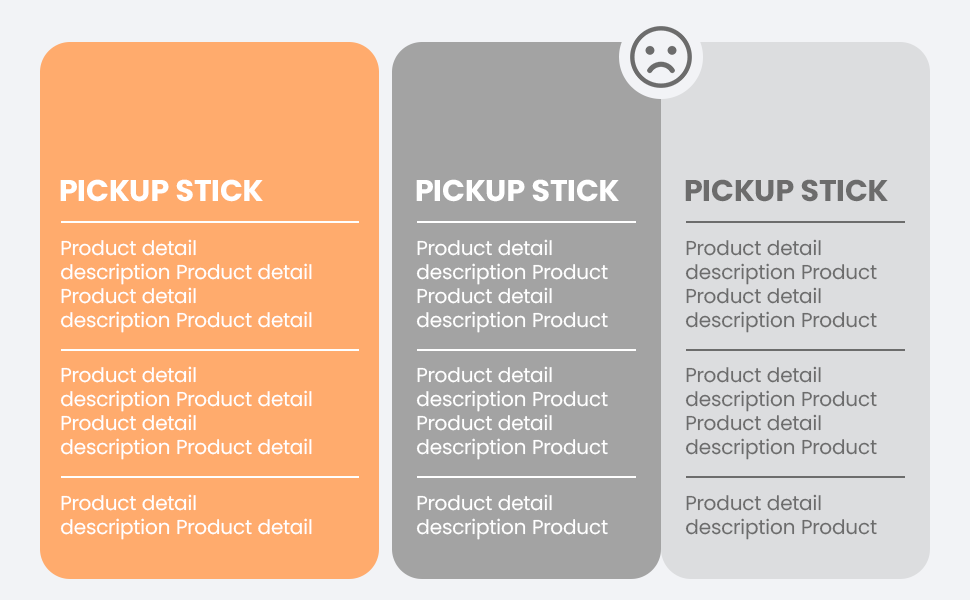
<style>
.page{position:relative;width:970px;height:600px;background:#ffab6d}
.page>*{position:absolute;margin:0}
.t1{font:30px "Poppins-Bold";color:#ffffff;text-transform:uppercase}
.t2{font:30px "Poppins-Bold";color:#6c6c6c;text-transform:uppercase}
.t3{font:20px "Poppins-Regular";color:#ffffff}
.t4{font:20px "Poppins-Regular";color:#6c6c6c}
</style>
<div class="page">
<p class="t1" style="left:60px;top:179px;width:203px;height:23px">PICKUP STICK</p>
<p class="t1" style="left:416px;top:179px;width:203px;height:23px">PICKUP STICK</p>
<p class="t2" style="left:685px;top:179px;width:203px;height:23px">PICKUP STICK</p>
<p class="t3" style="left:60px;top:239px;width:252px;height:94px">Product detail<br>description Product detail<br>Product detail<br>description Product detail</p>
<p class="t3" style="left:416px;top:239px;width:192px;height:94px">Product detail<br>description Product<br>Product detail<br>description Product</p>
<p class="t4" style="left:685px;top:239px;width:192px;height:94px">Product detail<br>description Product<br>Product detail<br>description Product</p>
<p class="t3" style="left:60px;top:366px;width:252px;height:94px">Product detail<br>description Product detail<br>Product detail<br>description Product detail</p>
<p class="t3" style="left:416px;top:366px;width:192px;height:94px">Product detail<br>description Product <br>Product detail<br>description Product</p>
<p class="t4" style="left:685px;top:366px;width:192px;height:94px">Product detail<br>description Product <br>Product detail<br>description Product</p>
<p class="t3" style="left:60px;top:494px;width:252px;height:46px">Product detail<br>description Product detail</p>
<p class="t3" style="left:416px;top:494px;width:192px;height:46px">Product detail<br>description Product</p>
<p class="t4" style="left:685px;top:494px;width:192px;height:46px">Product detail<br>description Product</p>
</div>
